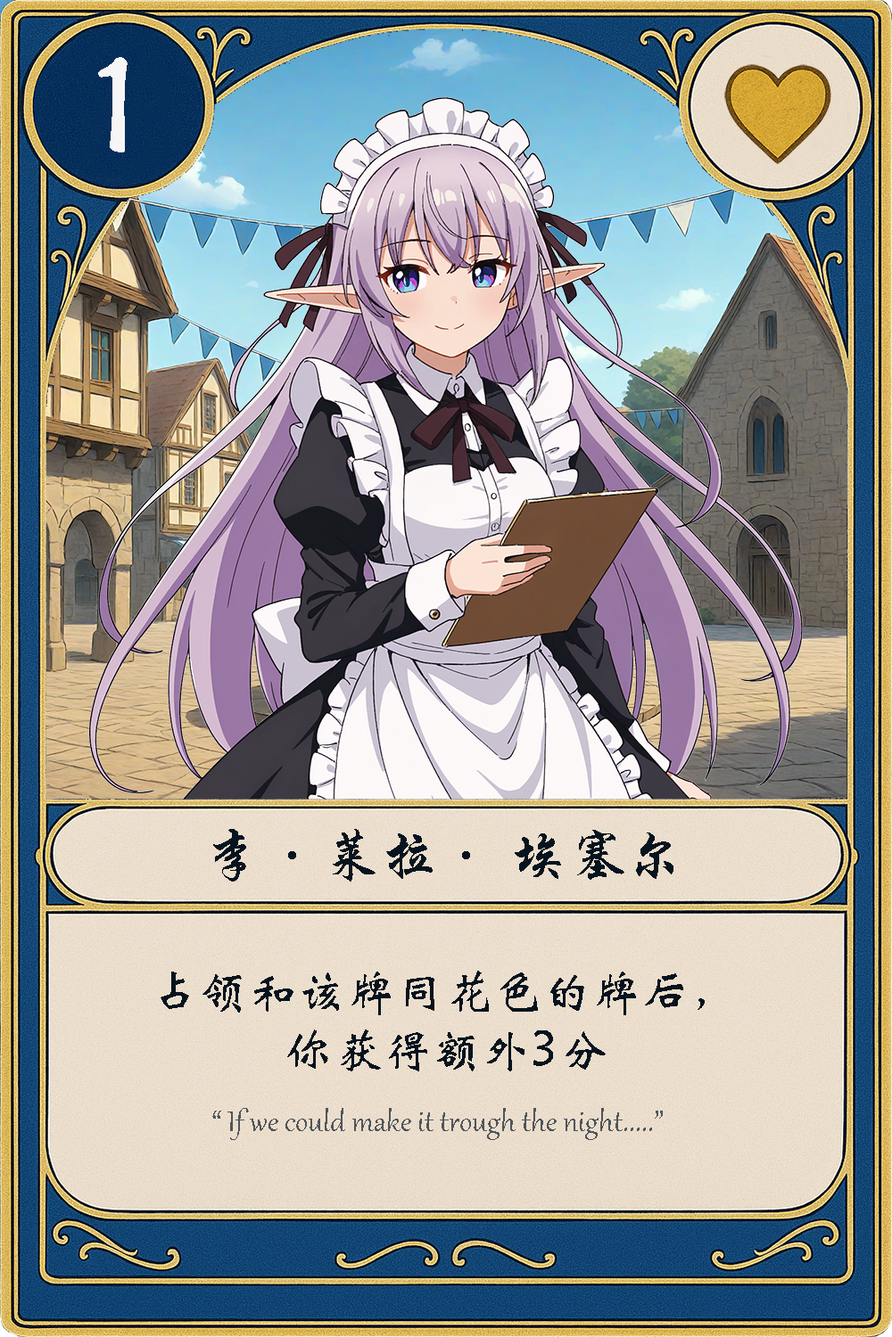
<style>
.page{position:relative;width:892px;height:1337px}
.page>*{position:absolute;margin:0}
.t1{font:133.7px "FZSXSLKJW--GB1-0";color:#f6f6f6}
.t2{font:58px "STXingkai";color:#06141f}
.t3{font:49px "STXinwei";color:#05131e}
.t4{font:35.7px "Gabriola";color:#4f555a}
</style>
<div class="page">
<p class="t1" style="left:98px;top:57px;width:29px;height:95px">1</p>
<p class="t2" style="left:213px;top:829px;width:460px;height:53px">李·莱拉· 埃塞尔</p>
<p class="t3" style="left:160px;top:971px;width:544px;height:101px;text-align:center">占领和该牌同花色的牌后，<br>你获得额外3分</p>
<p class="t4" style="left:212px;top:1108px;width:450px;height:32px">“ If we could make it trough the night.....”</p>
</div>
